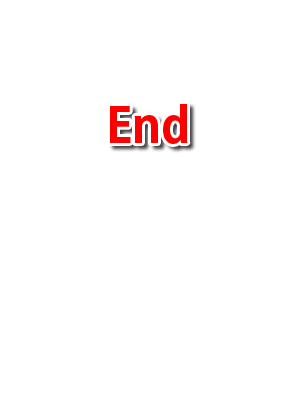
<style>
.page{position:relative;width:300px;height:400px;background:#ffffff}
.page>*{position:absolute;margin:0}
.t1{font:48px "KozGoPr6N-Bold";color:#ff0000}
</style>
<div class="page">
<p class="t1" style="left:110px;top:104px;width:78px;height:40px">End</p>
</div>
